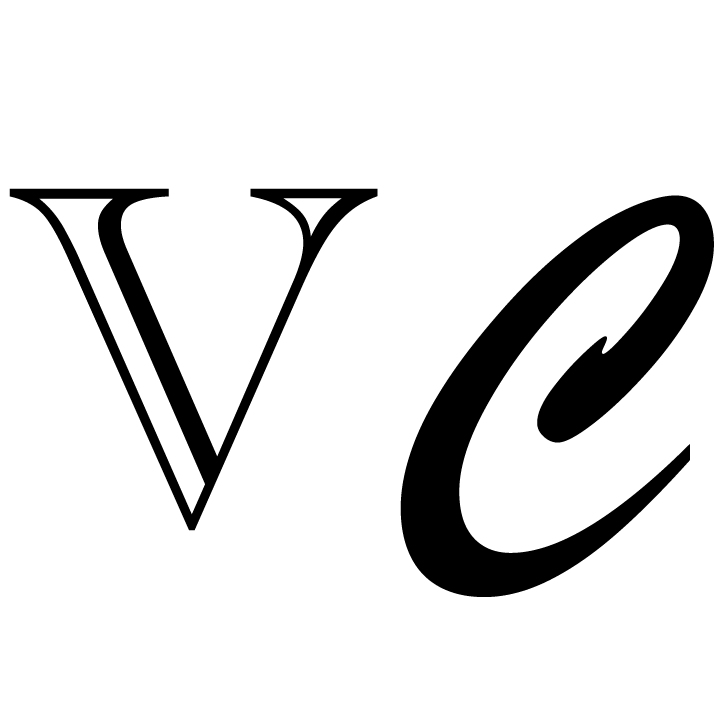
<style>
.page{position:relative;width:720px;height:720px;background:#ffffff}
.page>*{position:absolute;margin:0}
.t1{font:500px "AcademyEngravedLetPlain";color:#000000}
.t2{font:500px "BrushScriptMT";color:#000000}
</style>
<div class="page">
<p class="t1" style="left:9px;top:188px;width:705px;height:409px">V<span class="t2">C</span></p>
</div>
